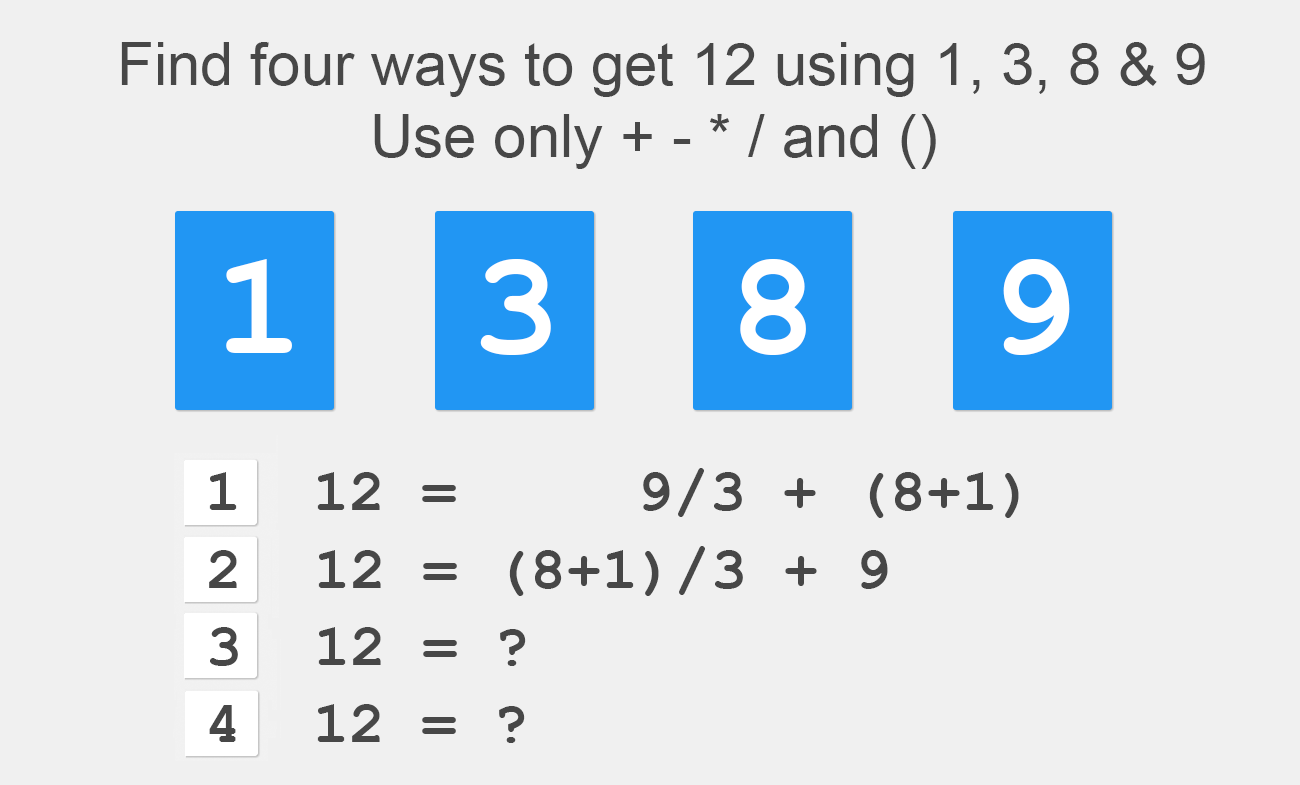
<style>
.page{position:relative;width:1300px;height:785px;background:#f0f0f0}
.page>*{position:absolute;margin:0}
.t1{font:60px "ArialMT";color:#474747}
.t2{font:150px "CourierNewPS-BoldMT";color:#ffffff}
.t3{font:60px "CourierNewPS-BoldMT";color:#474747}
</style>
<div class="page">
<p class="t1" style="left:121px;top:42px;width:1084px;height:127px;text-align:center">Find four ways to get 12 using 1, 3, 8 &amp; 9<br>Use only + - * / and ()</p>
<p class="t2" style="left:226px;top:259px;width:66px;height:94px">1</p>
<p class="t2" style="left:480px;top:259px;width:71px;height:96px">3</p>
<p class="t2" style="left:740px;top:259px;width:66px;height:96px">8</p>
<p class="t2" style="left:1003px;top:259px;width:67px;height:96px">9</p>
<p class="t3" style="left:209px;top:468px;width:810px;height:50px">1  12 =     9/3 + (8+1)</p>
<p class="t3" style="left:209px;top:546px;width:679px;height:50px">2  12 = (8+1)/3 + 9</p>
<p class="t3" style="left:210px;top:627px;width:316px;height:39px">3  12 = ?</p>
<p class="t3" style="left:209px;top:704px;width:316px;height:39px">4  12 = ?</p>
</div>
